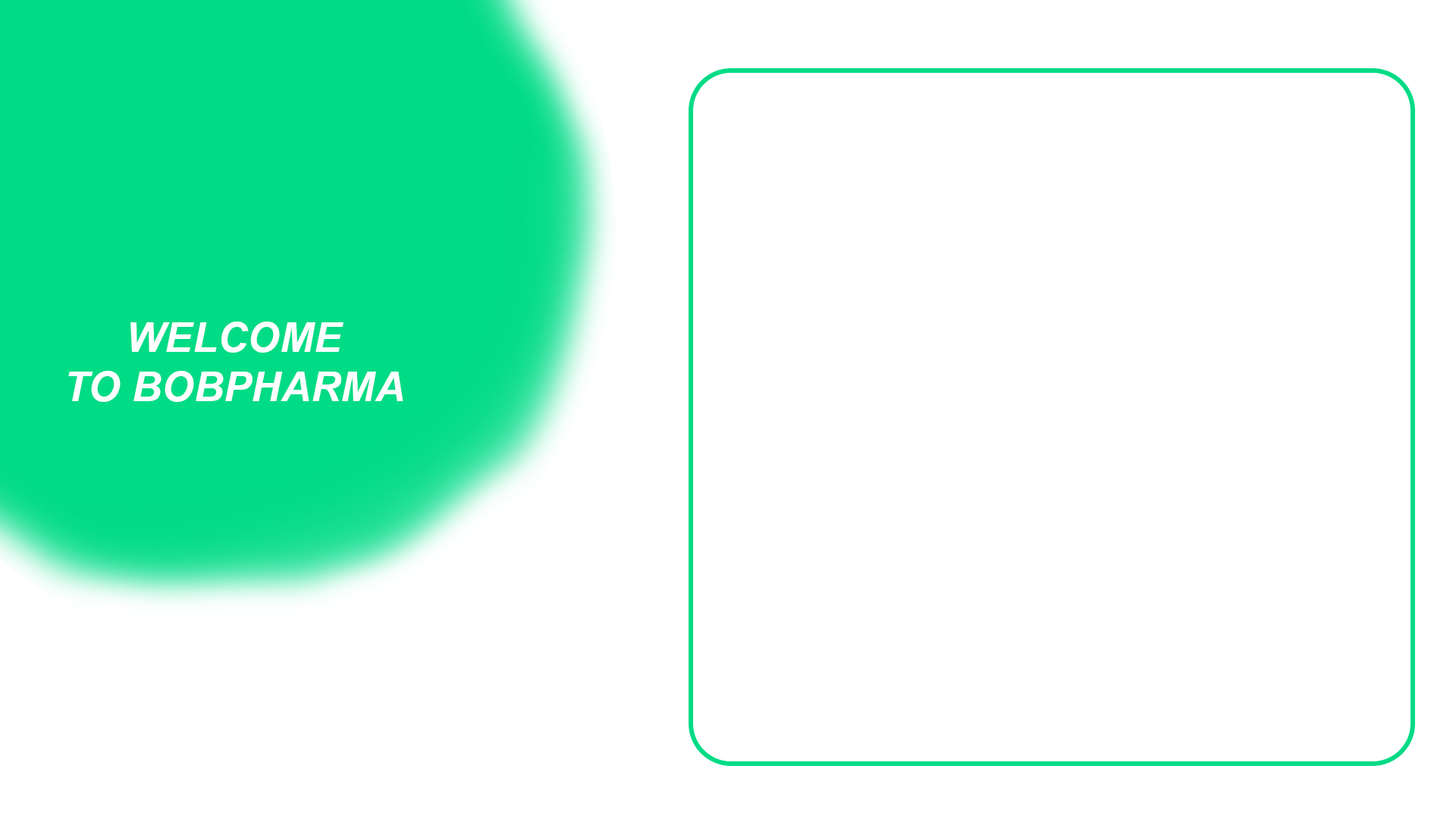
<style>
.page{position:relative;width:1456px;height:819px;background:#ffffff}
.page>*{position:absolute;margin:0}
.t1{font:41.3px "Arial-BoldItalicMT";color:#ffffff}
</style>
<div class="page">
<p class="t1" style="left:68px;top:322px;width:335px;height:80px;text-align:center">WELCOME<br>TO BOBPHARMA</p>
</div>
